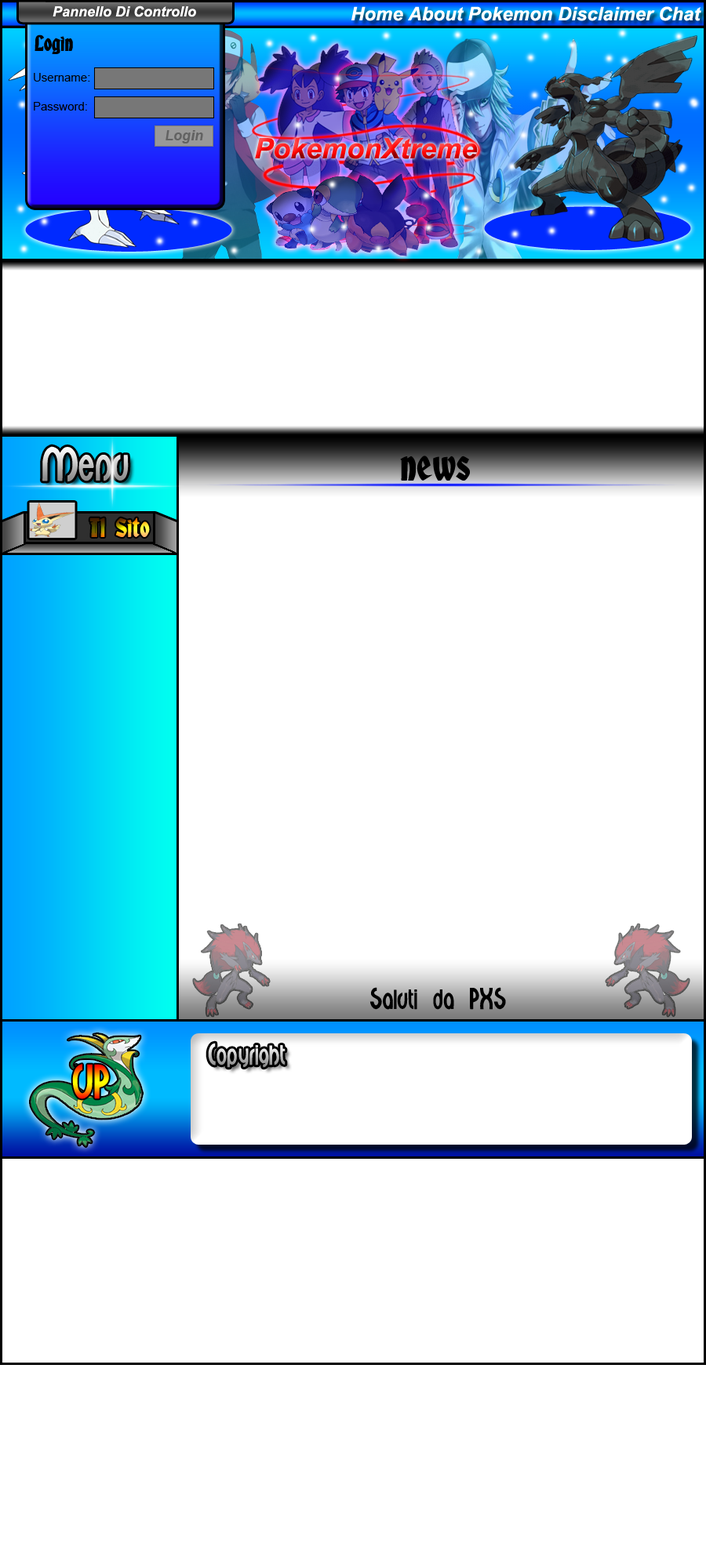
<style>
.page{position:relative;width:706px;height:1568px;background:#ffffff}
.page>*{position:absolute;margin:0}
.t1{font:14.1px "Arial-BoldItalicMT";color:#ffffff}
.t2{font:18.8px "Arial-BoldItalicMT";color:#ffffff}
.t3{font:19.6px "AlbertText-Bold";color:#000000}
.t4{font:11.8px "ArialMT";color:#000000}
.t5{font:14.1px "Arial-BoldItalicMT";color:#626262}
.t6{font:28.2px "Arial-BoldItalicMT"}
.t7{font:37.6px "Minerva"}
.t8{font:37.6px "AlbertText-Bold";color:#000000}
.t9{font:23.5px "AlbertText-Bold"}
.t10{font:23.5px "Minerva";color:#000000}
.t11{font:23.5px "Minerva"}
</style>
<div class="page">
<p class="t1" style="left:53px;top:5px;width:143px;height:12px">Pannello Di Controllo</p>
<p class="t2" style="left:351px;top:6px;width:350px;height:15px">Home About Pokemon Disclaimer Chat</p>
<p class="t3" style="left:34px;top:34px;width:39px;height:20px">Login</p>
<p class="t4" style="left:34px;top:73px;width:56px;height:9px">Username:</p>
<p class="t4" style="left:34px;top:102px;width:53px;height:9px">Password:</p>
<p class="t5" style="left:165px;top:130px;width:38px;height:13px">Login</p>
<p class="t6" style="left:255px;top:138px;width:222px;height:21px">PokemonXtreme</p>
<p class="t7" style="left:42px;top:446px;width:87px;height:36px">Menu</p>
<p class="t8" style="left:400px;top:456px;width:70px;height:25px">news</p>
<p class="t9" style="left:89px;top:517px;width:61px;height:20px">Il Sito</p>
<p class="t10" style="left:369px;top:987px;width:137px;height:23px">Saluti da PXS</p>
<p class="t11" style="left:208px;top:1043px;width:77px;height:25px">Copyright</p>
<p class="t7" style="left:72px;top:1064px;width:37px;height:35px">UP</p>
</div>
